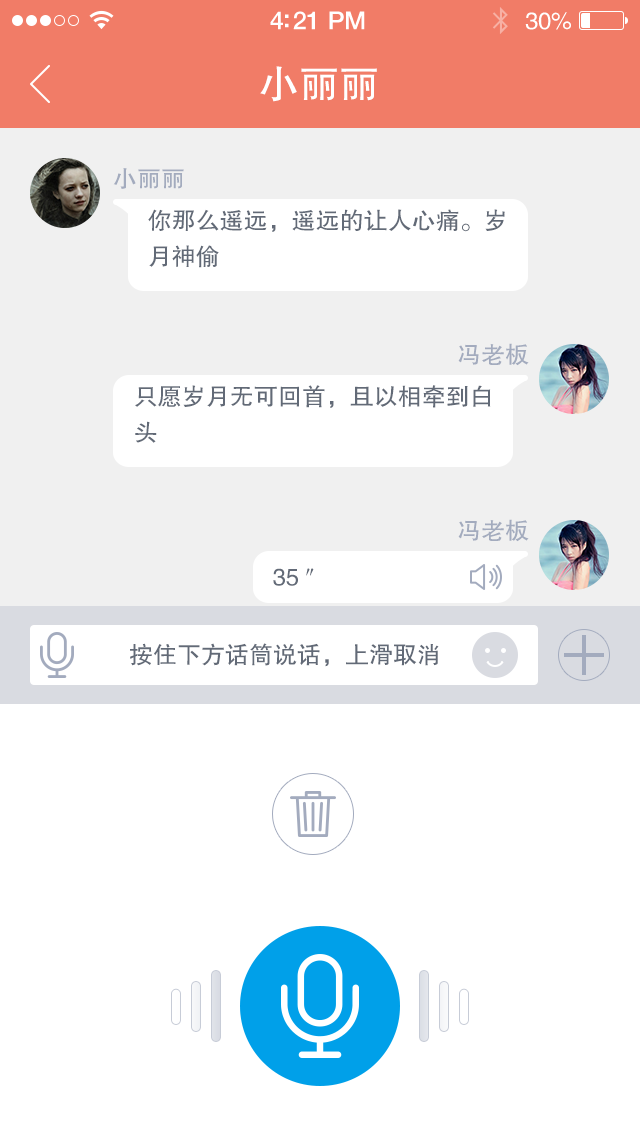
<style>
.page{position:relative;width:640px;height:1136px;background:#ffffff}
.page>*{position:absolute;margin:0}
.t1{font:25px "HelveticaNeue-Medium";letter-spacing:-0.02em;color:#ffffff}
.t2{font:24px "FZHTJW--GB1-0";letter-spacing:-0.02em;color:#ffffff}
.t3{font:40px "FZHTJW--GB1-0";color:#ffffff}
.t4{font:24px "FZHTJW--GB1-0";color:#a3abbe}
.t5{font:24px/36px "FZHTJW--GB1-0";color:#626a77}
.t6{font:24px "FZHTJW--GB1-0";color:#626a77}
</style>
<div class="page">
<p class="t1" style="left:270px;top:11px;width:95px;height:19px">4:21 PM</p>
<p class="t2" style="left:525px;top:12px;width:46px;height:18px">30%</p>
<p class="t3" style="left:260px;top:66px;width:117px;height:36px">小丽丽</p>
<p class="t4" style="left:113px;top:168px;width:71px;height:21px">小丽丽</p>
<p class="t5" style="left:148px;top:209px;width:357px;height:59px">你那么遥远，遥远的让人心痛。岁<br>月神偷</p>
<p class="t4" style="left:458px;top:343px;width:71px;height:23px">冯老板</p>
<p class="t5" style="left:135px;top:385px;width:356px;height:58px">只愿岁月无可回首，且以相牵到白<br>头</p>
<p class="t4" style="left:458px;top:519px;width:71px;height:23px">冯老板</p>
<p class="t6" style="left:273px;top:568px;width:41px;height:18px">35 ″</p>
<p class="t6" style="left:130px;top:643px;width:309px;height:24px">按住下方话筒说话，上滑取消</p>
</div>
